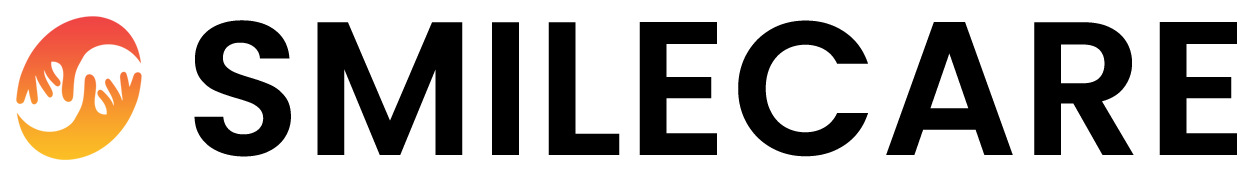
<style>
.page{position:relative;width:1256px;height:176px;background:#ffffff}
.page>*{position:absolute;margin:0}
.t1{font:190px "Poppins-SemiBold";letter-spacing:0.02em;color:#000000}
</style>
<div class="page">
<p class="t1" style="left:194px;top:20px;width:1043px;height:137px">SMILECARE</p>
</div>
